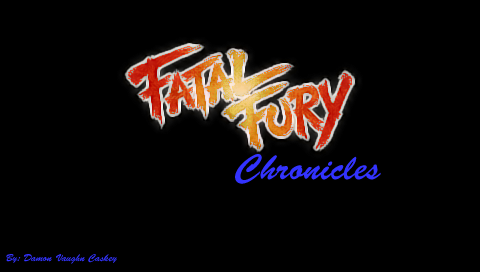
<style>
.page{position:relative;width:480px;height:272px;background:#000000}
.page>*{position:absolute;margin:0}
.t1{font:36px "BrushScriptStd";color:#3333ff}
.t2{font:10px "BrushScriptStd";color:#3333ff}
</style>
<div class="page">
<p class="t1" style="left:235px;top:154px;width:146px;height:30px">Chronicles</p>
<p class="t2" style="left:6px;top:254px;width:111px;height:10px">By: Damon Vaughn Caskey</p>
</div>
